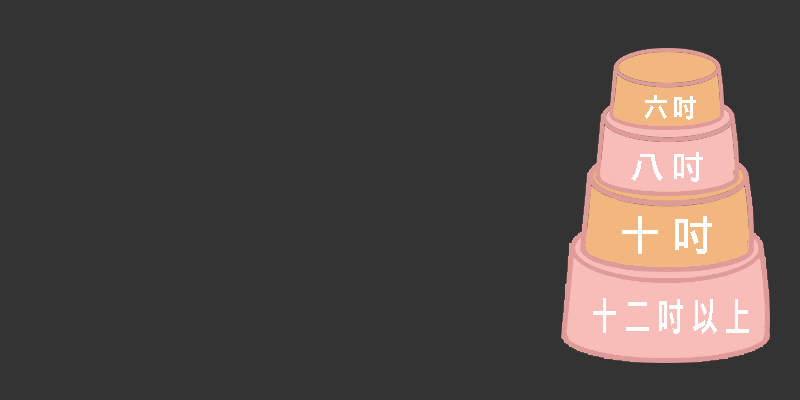
<style>
.page{position:relative;width:800px;height:400px;background:#333333}
.page>*{position:absolute;margin:0}
.t1{font:26px "DFNHei-W9-WIN-BF";letter-spacing:0.15em;color:#ffffff}
.t2{font:34px "DFNHei-W9-WIN-BF";letter-spacing:0.15em;color:#ffffff}
.t3{font:43px "DFNHei-W9-WIN-BF";letter-spacing:0.15em;color:#ffffff}
.t4{font:39px "DFNHei-W9-WIN-BF";letter-spacing:0.15em;color:#ffffff;scale:0.7 1}
</style>
<div class="page">
<p class="t1" style="left:645px;top:95px;width:51px;height:25px">六吋</p>
<p class="t2" style="left:631px;top:152px;width:72px;height:30px">八吋</p>
<p class="t3" style="left:622px;top:216px;width:90px;height:38px">十吋</p>
<p class="t4" style="left:593px;top:298px;width:156px;height:36px">十二吋以上</p>
</div>
